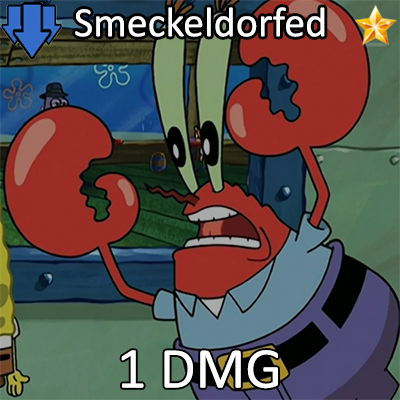
<style>
.page{position:relative;width:400px;height:400px}
.page>*{position:absolute;margin:0}
.t1{font:72px "Calibri";color:#ffffff}
.t2{font:100px "Calibri";color:#ffffff}
</style>
<div class="page">
<p class="t1" style="left:75px;top:7px;width:250px;height:30px">Smeckeldorfed</p>
<p class="t2" style="left:121px;top:350px;width:157px;height:39px">1 DMG</p>
</div>
